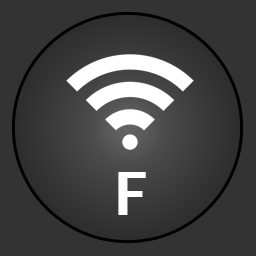
<style>
.page{position:relative;width:256px;height:256px;background:#333333}
.page>*{position:absolute;margin:0}
.t1{font:60px "LucidaGrande-Bold";color:#ffffff}
</style>
<div class="page">
<p class="t1" style="left:118px;top:172px;width:28px;height:43px">F</p>
</div>
